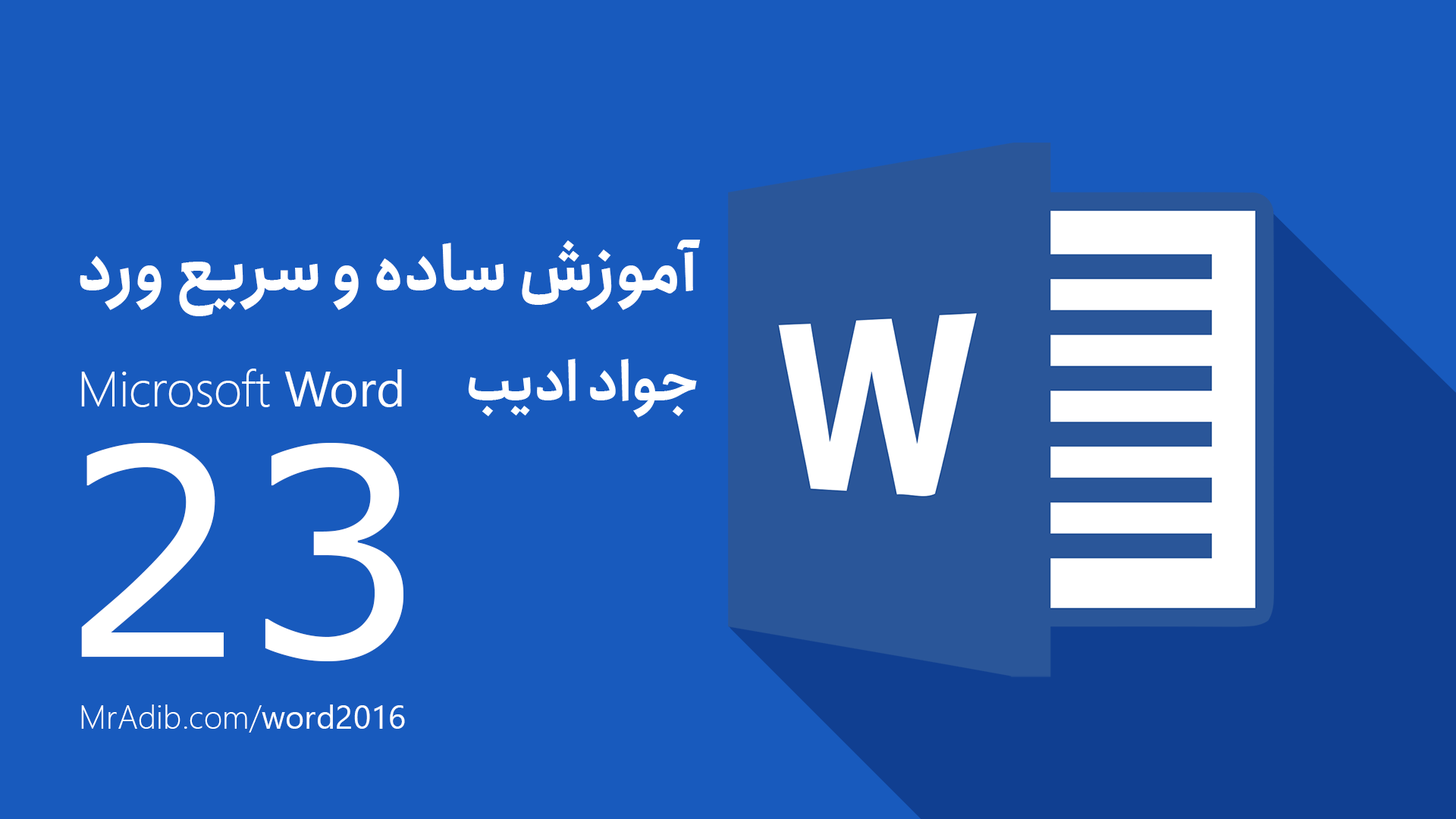
<style>
.page{position:relative;width:1456px;height:819px;background:#185abd}
.page>*{position:absolute;margin:0}
.t1{font:62.4px "Anjoman-Bold";color:#ffffff}
.t2{font:54.6px "Anjoman-Bold";color:#ffffff}
.t3{font:50px "SegoeUI-Light";color:#ffffff}
.t4{font:50px "SegoeUI";color:#ffffff}
.t5{font:288.2px "Verdana";color:#ffffff}
.t6{font:33px "SegoeUI-Light";color:#ffffff}
.t7{font:33px "SegoeUI";color:#ffffff}
</style>
<div class="page">
<p class="t1" style="left:80px;top:240px;width:621px;height:76px">آموزش ساده و سریع ورد</p>
<p class="t2" style="left:468px;top:359px;width:229px;height:59px">جواد ادیب</p>
<p class="t3" style="left:81px;top:369px;width:321px;height:38px">Microsoft <span class="t4">Word</span></p>
<p class="t5" style="left:81px;top:443px;width:322px;height:218px">23</p>
<p class="t6" style="left:81px;top:704px;width:324px;height:29px">MrAdib.com/<span class="t7">word2016</span></p>
</div>
